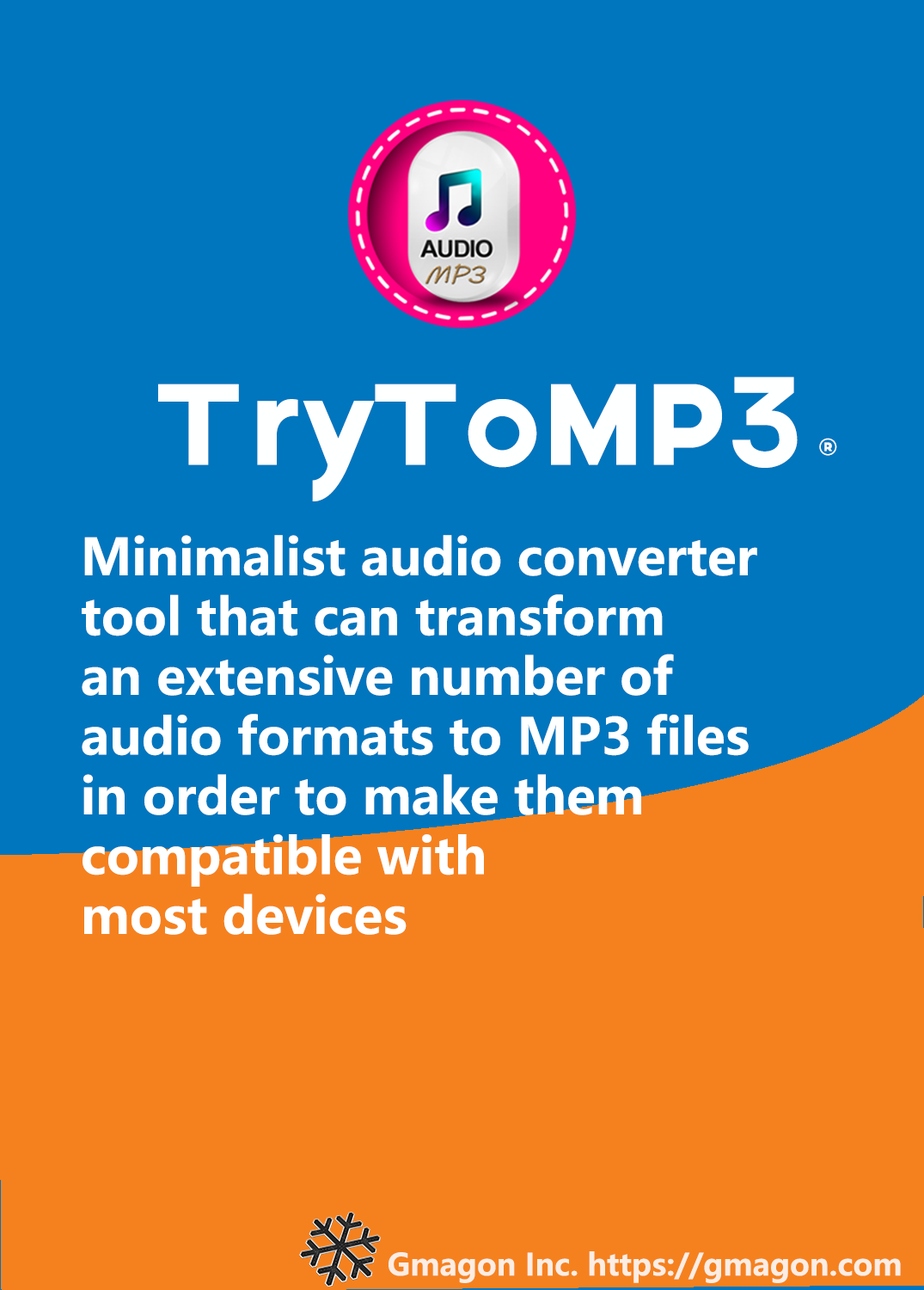
<style>
.page{position:relative;width:924px;height:1290px;background:#0076be}
.page>*{position:absolute;margin:0}
.t1{font:123.8px "Axis";color:#feffff}
.t2{font:55px "Axis";color:#feffff}
.t3{font:49.8px "MicrosoftYaHei-Bold";color:#feffff}
.t4{font:30px "MicrosoftYaHei-Bold";color:#fcede4}
</style>
<div class="page">
<p class="t1" style="left:158px;top:377px;width:640px;height:124px">TryToMP3</p>
<p class="t2" style="left:820px;top:438px;width:18px;height:18px">®</p>
<p class="t3" style="left:82px;top:535px;width:676px;height:400px">Minimalist audio converter <br>tool that can transform <br>an extensive number of <br>audio formats to MP3 files <br>in order to make them <br>compatible with <br>most devices</p>
<p class="t4" style="left:389px;top:1251px;width:512px;height:32px">Gmagon Inc. https://gmagon.com</p>
</div>
